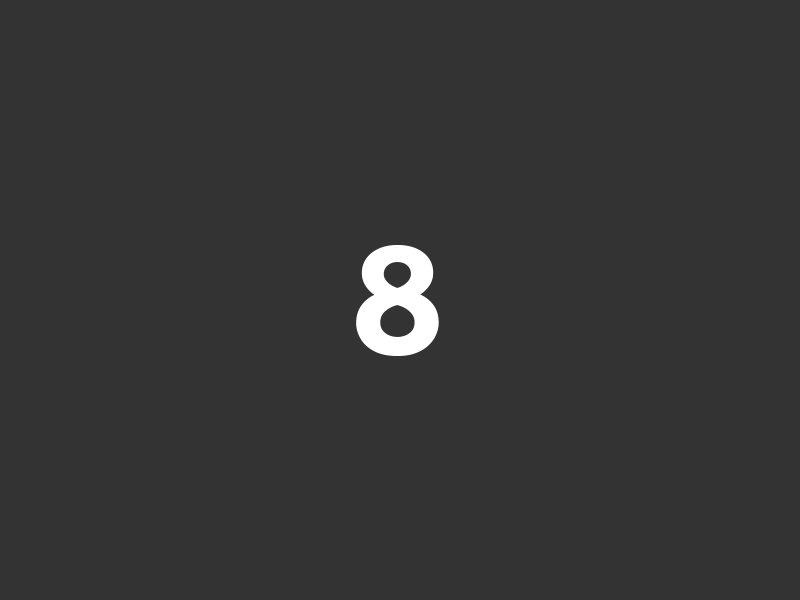
<style>
.page{position:relative;width:800px;height:600px;background:#333333}
.page>*{position:absolute;margin:0}
.t1{font:166.7px "Effra-Bold";color:#ffffff}
</style>
<div class="page">
<p class="t1" style="left:356px;top:245px;width:83px;height:111px">8</p>
</div>
